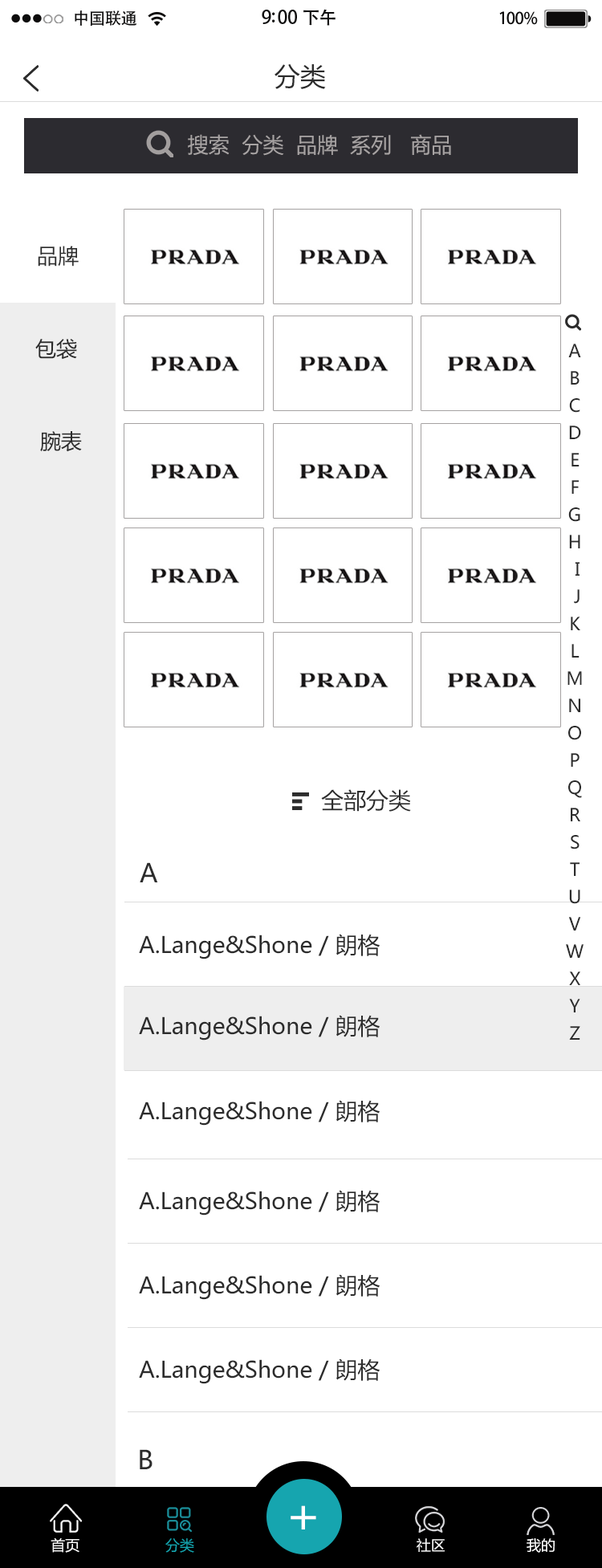
<style>
.page{position:relative;width:602px;height:1568px;background:#ffffff}
.page>*{position:absolute;margin:0}
.t1{font:25.7px "MicrosoftYaHei";color:#2c2c2c}
.t2{font:20.9px "MicrosoftYaHei";color:#a7a3a3}
.t3{font:20.9px "MicrosoftYaHei";color:#2c2c2c}
.t4{font:17.7px/13.6px "MicrosoftYaHei";color:#2c2c2c}
.t5{font:22.5px "MicrosoftYaHei";color:#2c2c2c}
.t6{font:57.8px "RS_ZongYi";color:#ffffff}
.t7{font:14.5px "MicrosoftYaHei";color:#ffffff}
.t8{font:14.5px "MicrosoftYaHei";color:#16a5af}
</style>
<div class="page">
<p class="t1" style="left:275px;top:63px;width:51px;height:26px">分类</p>
<p class="t2" style="left:188px;top:134px;width:42px;height:21px">搜索</p>
<p class="t2" style="left:242px;top:134px;width:209px;height:22px">分类  品牌  系列   商品</p>
<p class="t3" style="left:38px;top:246px;width:41px;height:21px">品牌</p>
<p class="t3" style="left:35px;top:339px;width:42px;height:21px">包袋</p>
<p class="t4" style="left:566px;top:344px;width:18px;height:696px;text-align:center">A<br><br>B<br><br>C<br><br>D<br><br>E<br><br>F<br><br>G<br><br>H<br><br> I<br><br> J<br><br>K<br><br>L<br><br>M<br><br>N<br><br>O<br><br>P<br><br>Q<br><br>R<br><br>S<br><br>T<br><br>U<br><br>V<br><br>W<br><br>X<br><br>Y<br><br>Z</p>
<p class="t3" style="left:40px;top:431px;width:42px;height:21px">腕表</p>
<p class="t5" style="left:321px;top:789px;width:90px;height:23px">全部分类</p>
<p class="t1" style="left:140px;top:862px;width:18px;height:20px">A</p>
<p class="t5" style="left:139px;top:934px;width:241px;height:25px">A.Lange&amp;Shone / 朗格</p>
<p class="t5" style="left:139px;top:1015px;width:241px;height:26px">A.Lange&amp;Shone / 朗格</p>
<p class="t5" style="left:139px;top:1100px;width:241px;height:26px">A.Lange&amp;Shone / 朗格</p>
<p class="t5" style="left:139px;top:1190px;width:241px;height:26px">A.Lange&amp;Shone / 朗格</p>
<p class="t5" style="left:139px;top:1274px;width:241px;height:26px">A.Lange&amp;Shone / 朗格</p>
<p class="t5" style="left:139px;top:1358px;width:241px;height:26px">A.Lange&amp;Shone / 朗格</p>
<p class="t1" style="left:140px;top:1449px;width:13px;height:20px">B</p>
<p class="t6" style="left:291px;top:1505px;width:25px;height:24px">+</p>
<p class="t7" style="left:51px;top:1537px;width:504px;height:16px">首页                    <span class="t8">分类</span>                                                    社区                   我的</p>
</div>
